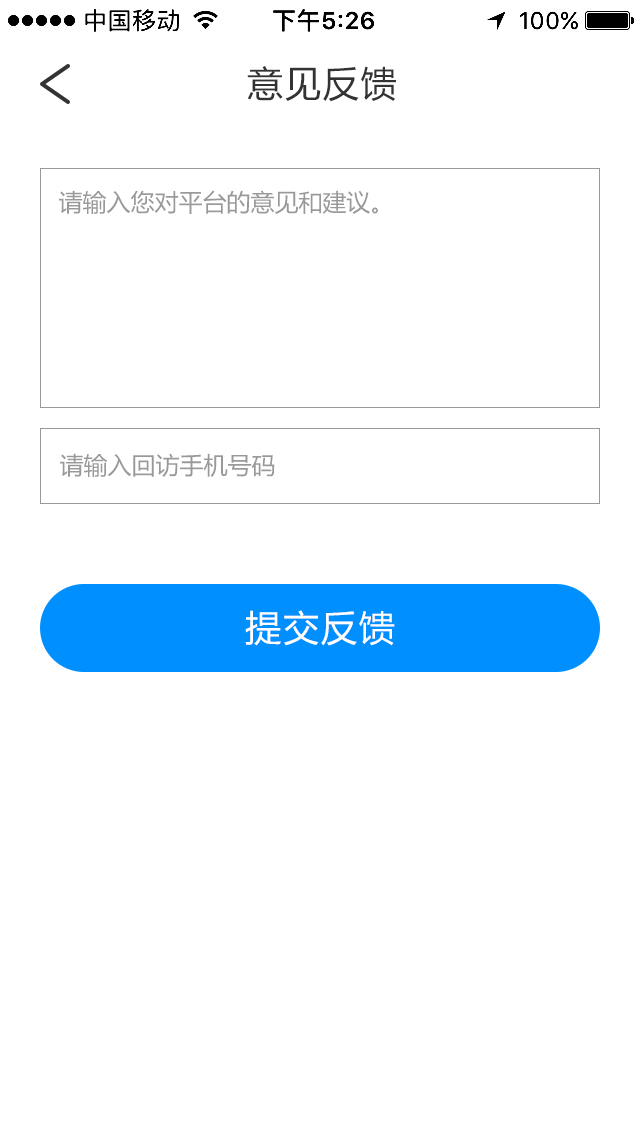
<style>
.page{position:relative;width:640px;height:1136px;background:#ffffff}
.page>*{position:absolute;margin:0}
.t1{font:36px "MicrosoftYaHei";letter-spacing:0.05em;color:#333333}
.t2{font:24px "MicrosoftYaHei";color:#999999}
.t3{font:36px "MicrosoftYaHei";letter-spacing:0.05em;color:#ffffff}
</style>
<div class="page">
<p class="t1" style="left:247px;top:66px;width:149px;height:36px">意见反馈</p>
<p class="t2" style="left:59px;top:190px;width:319px;height:24px">请输入您对平台的意见和建议。</p>
<p class="t2" style="left:60px;top:453px;width:215px;height:24px">请输入回访手机号码</p>
<p class="t3" style="left:245px;top:610px;width:150px;height:36px">提交反馈</p>
</div>
